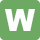
<style>
.page{position:relative;width:40px;height:40px;background:#6da963}
.page>*{position:absolute;margin:0}
.t1{font:29.9px "Arial-Black";color:#ffffff}
</style>
<div class="page">
<p class="t1" style="left:5px;top:9px;width:30px;height:22px">W</p>
</div>
